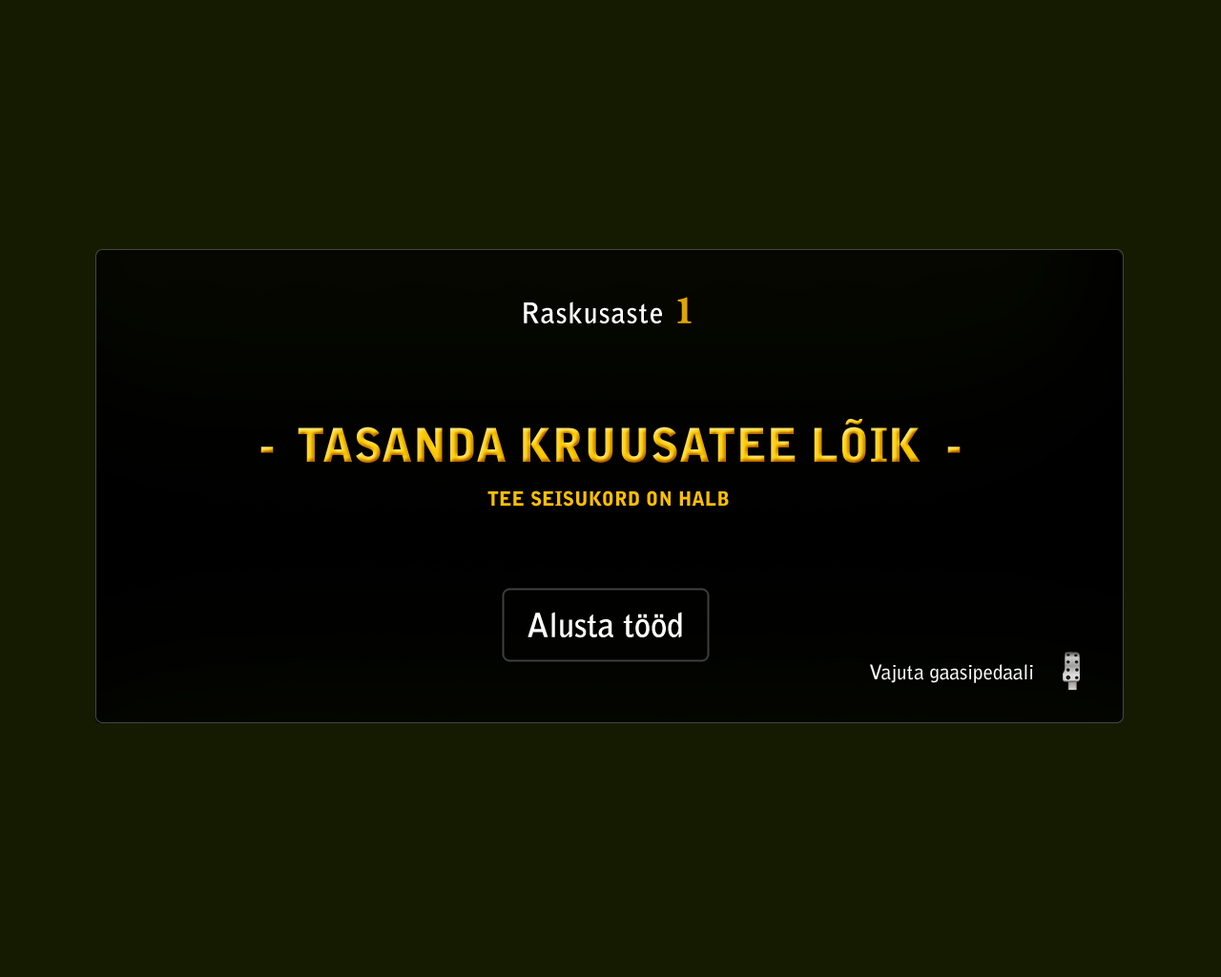
<style>
.page{position:relative;width:1221px;height:977px;background:#141b00}
.page>*{position:absolute;margin:0}
.t1{font:27.9px "BellGothicStd-Bold";letter-spacing:0.05em;color:#fefefe}
.t2{font:39.7px "AGaramondLT-Bold";letter-spacing:0.05em;color:#e0a404}
.t3{font:46.3px "BellGothicStd-Black"}
.t4{font:19.4px "BellGothicStd-Black";color:#fdbf01;text-transform:uppercase}
.t5{font:32.8px "BellGothicStd-Bold";color:#fefefe}
.t6{font:20px "BellGothicStd-Bold";color:#ffffff}
</style>
<div class="page">
<p class="t1" style="left:524px;top:297px;width:168px;height:26px">Raskusaste <span class="t2">1</span></p>
<p class="t3" style="left:260px;top:419px;width:700px;height:44px">-  TASANDA KRUUSATEE LÕIK  -</p>
<p class="t4" style="left:487px;top:490px;width:242px;height:16px">Tee seisukord on halb</p>
<p class="t5" style="left:527px;top:611px;width:155px;height:27px">Alusta tööd</p>
<p class="t6" style="left:870px;top:664px;width:163px;height:19px">Vajuta gaasipedaali</p>
</div>
